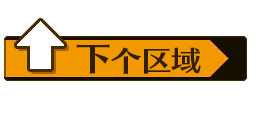
<style>
.page{position:relative;width:256px;height:128px;background:#ffffff}
.page>*{position:absolute;margin:0}
.t1{font:33.3px "SkipStd-B";letter-spacing:0.125em;color:#301f00;scale:1.1 1}
.t2{font:28px "SkipStd-B";letter-spacing:-0.02em;color:#301f00;scale:1.1 1}
</style>
<div class="page">
<p class="t1" style="left:76px;top:44px;width:34px;height:30px">下</p>
<p class="t2" style="left:111px;top:47px;width:90px;height:27px">个区域</p>
</div>
